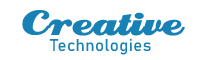
<style>
.page{position:relative;width:200px;height:60px;background:#ffffff}
.page>*{position:absolute;margin:0}
.t1{font:41.7px "Creampuff";letter-spacing:0.025em;color:#1781b5}
.t2{font:16.7px "Bahnschrift";letter-spacing:0.025em;color:#1781b5}
</style>
<div class="page">
<p class="t1" style="left:22px;top:10px;width:163px;height:26px">Creative</p>
<p class="t2" style="left:49px;top:39px;width:102px;height:16px">Technologies</p>
</div>
